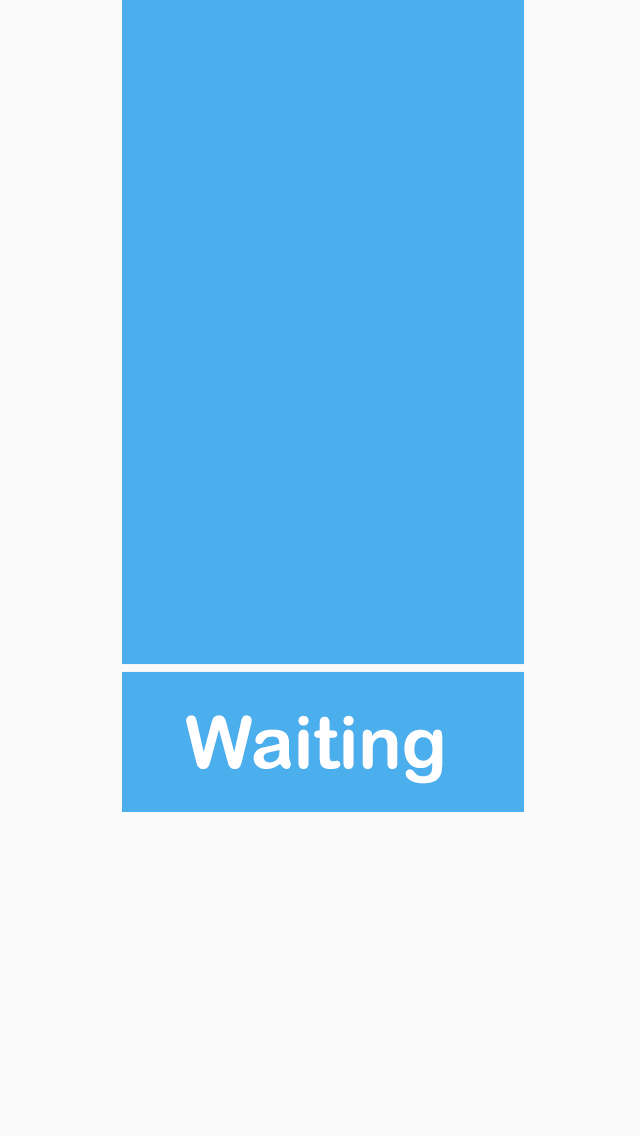
<style>
.page{position:relative;width:640px;height:1136px;background:#fafafa}
.page>*{position:absolute;margin:0}
.t1{font:72px "ArialRoundedMTBold";color:#ffffff}
</style>
<div class="page">
<p class="t1" style="left:186px;top:715px;width:257px;height:69px">Waiting</p>
</div>
